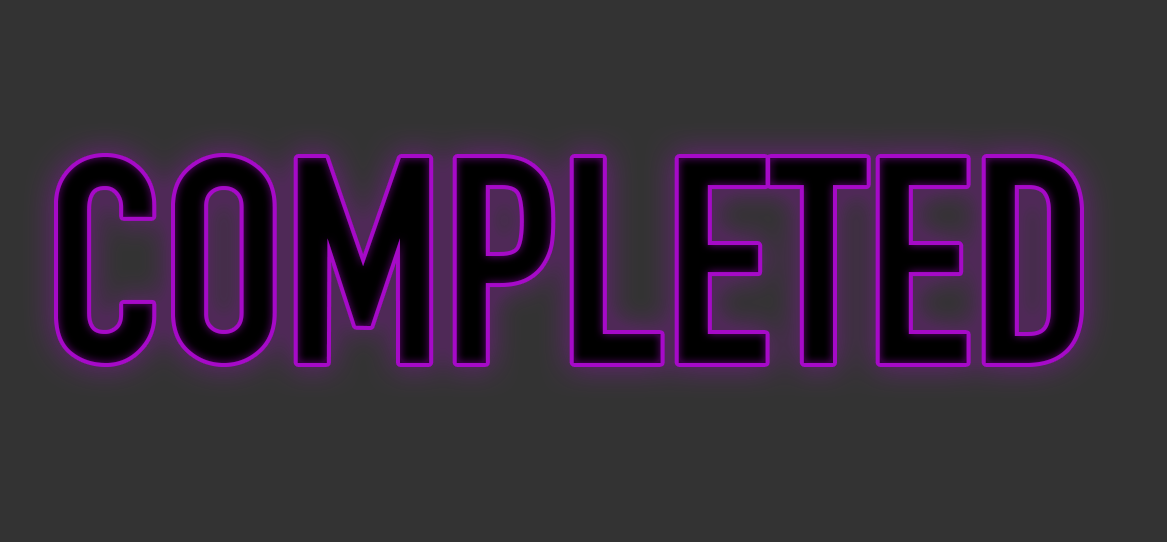
<style>
.page{position:relative;width:1167px;height:542px;background:#333333}
.page>*{position:absolute;margin:0}
.t1{font:285.8px "DINEngschrift";color:#030004}
</style>
<div class="page">
<p class="t1" style="left:58px;top:157px;width:1022px;height:206px">COMPLETED</p>
</div>
